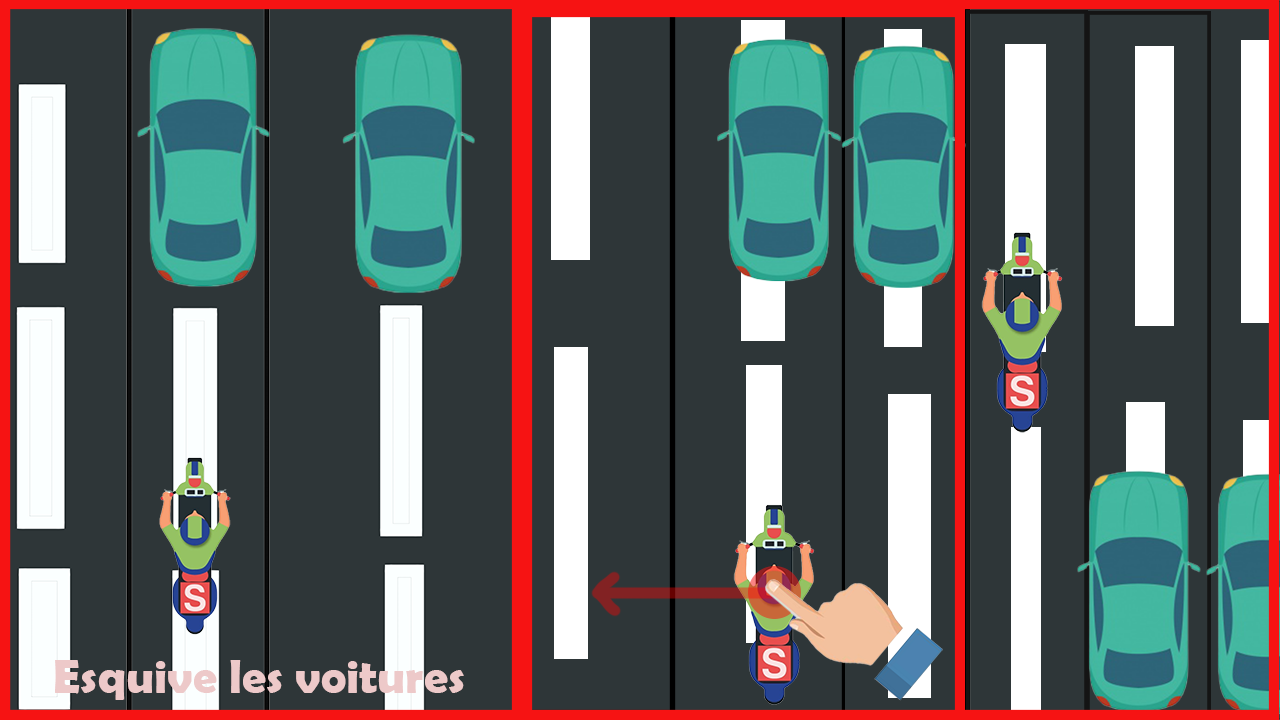
<style>
.page{position:relative;width:1280px;height:720px;background:#2e3638}
.page>*{position:absolute;margin:0}
.t1{font:48px "BerlinSansFBDemi-Bold";color:#edc9c9}
</style>
<div class="page">
<p class="t1" style="left:55px;top:660px;width:409px;height:40px">Esquive les voitures</p>
</div>
